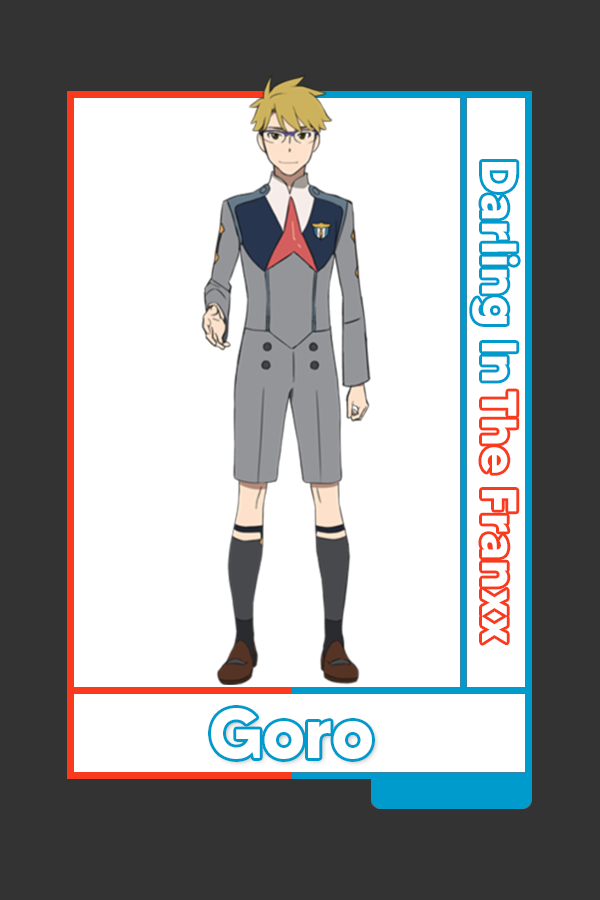
<style>
.page{position:relative;width:600px;height:900px;background:#ffffff}
.page>*{position:absolute;margin:0}
.t1{font:48.8px "MADETOMMY-Bold";color:#ffffff}
.t2{font:70.1px "MADETOMMY-Bold";color:#ffffff}
</style>
<div class="page">
<p class="t1" style="left:472px;top:162px;width:46px;height:219px;rotate:90deg">Darling In</p>
<p class="t1" style="left:481px;top:391px;width:36px;height:252px;rotate:90deg">The Franxx</p>
<p class="t2" style="left:211px;top:708px;width:161px;height:51px">Goro</p>
</div>
